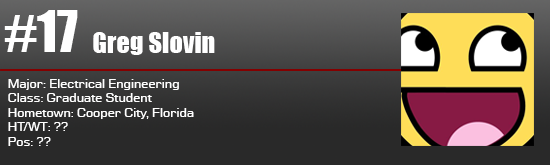
<style>
.page{position:relative;width:550px;height:165px}
.page>*{position:absolute;margin:0}
.t1{font:52.8px "Impact";color:#ffffff}
.t2{font:26.4px "Impact";color:#ffffff}
.t3{font:12px "Moire";color:#ffffff}
</style>
<div class="page">
<p class="t1" style="left:4px;top:10px;width:74px;height:42px">#17</p>
<p class="t2" style="left:93px;top:32px;width:122px;height:23px">Greg Slovin</p>
<p class="t3" style="left:8px;top:79px;width:186px;height:67px">Major: Electrical Engineering<br>Class: Graduate Student<br>Hometown: Cooper City, Florida<br>HT/WT: ??<br>Pos: ??</p>
</div>
